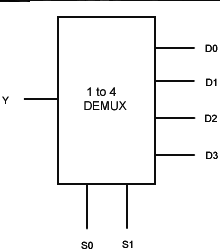
<style>
.page{position:relative;width:220px;height:250px;background:#ffffff}
.page>*{position:absolute;margin:0}
.t1{font:10px "ArialMT"}
.t2{font:12px "ArialMT"}
</style>
<div class="page">
<p class="t1" style="left:205px;top:43px;width:13px;height:8px">D0</p>
<p class="t1" style="left:206px;top:77px;width:11px;height:8px">D1</p>
<p class="t2" style="left:84px;top:86px;width:43px;height:24px"><span class="t1"> </span>1 to 4 <br>DEMUX</p>
<p class="t1" style="left:205px;top:113px;width:12px;height:8px">D2</p>
<p class="t1" style="left:206px;top:150px;width:12px;height:8px">D3</p>
</div>
